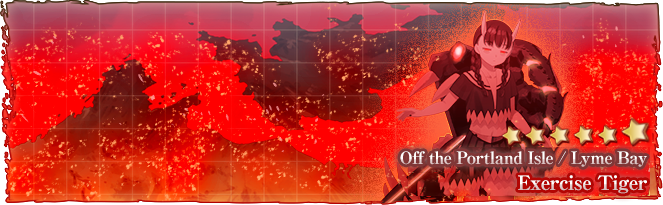
<style>
.page{position:relative;width:663px;height:205px}
.page>*{position:absolute;margin:0}
.t1{font:17px "RyuminPro-ExBold";letter-spacing:-0.04em}
.t2{font:20px "RyuminPro-ExBold";letter-spacing:-0.04em}
</style>
<div class="page">
<p class="t1" style="left:400px;top:151px;width:247px;height:16px">Off the Portland Isle / Lyme Bay</p>
<p class="t2" style="left:518px;top:175px;width:129px;height:19px">Exercise Tiger</p>
</div>
